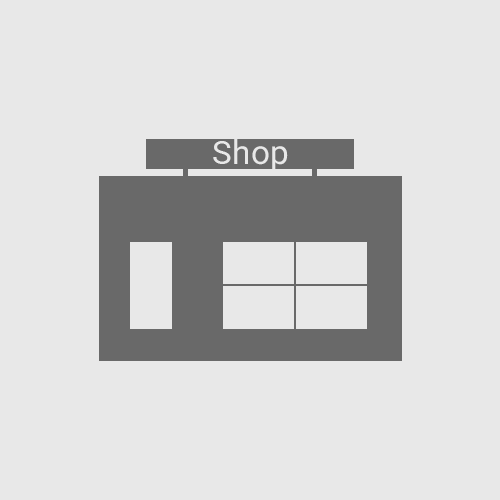
<style>
.page{position:relative;width:500px;height:500px;background:#e8e8e8}
.page>*{position:absolute;margin:0}
.t1{font:33.3px "Roboto-Regular";color:#e8e8e8}
</style>
<div class="page">
<p class="t1" style="left:213px;top:139px;width:75px;height:32px">Shop</p>
</div>
